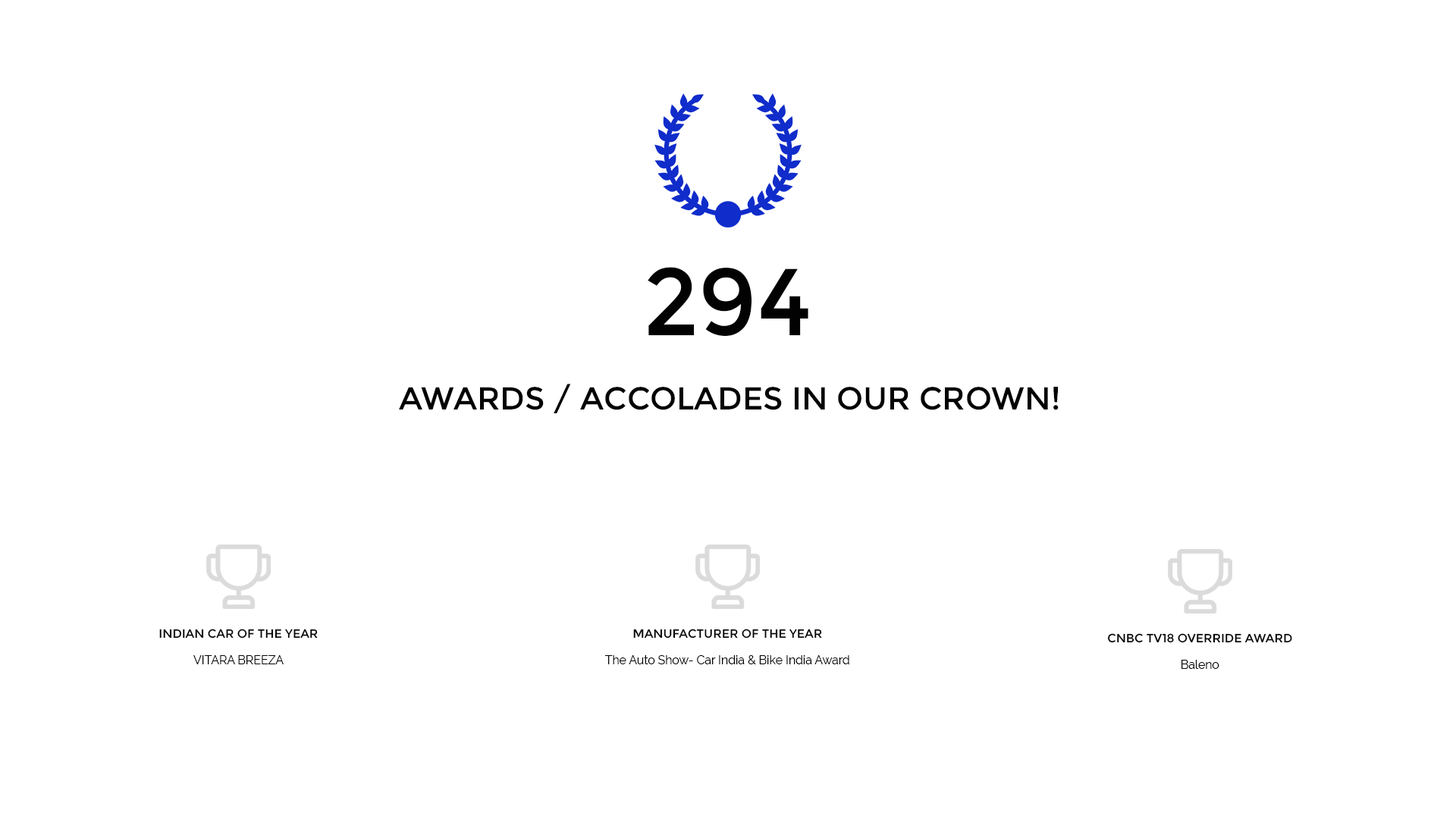
<style>
.page{position:relative;width:1456px;height:819px;background:#ffffff}
.page>*{position:absolute;margin:0}
.t1{font:94.8px "Montserrat-Regular";color:#020202;font-variant:small-caps}
.t2{font:31.6px "Montserrat-Regular";color:#020202;font-variant:small-caps}
.t3{font:11.9px/26.6px "Montserrat-Regular";color:#020202;font-variant:small-caps}
.t4{font:11.9px/26.6px "Raleway-Regular";color:#020202;font-variant:small-caps}
.t5{font:11.9px/26.6px "Raleway-Regular";color:#020202}
</style>
<div class="page">
<p class="t1" style="left:648px;top:267px;width:160px;height:69px">294</p>
<p class="t2" style="left:399px;top:384px;width:660px;height:29px">AWARDS / ACCOLADES IN OUR CROWN!</p>
<p class="t3" style="left:159px;top:629px;width:159px;height:35px;text-align:center">INDIAN CAR OF THE YEAR<br><span class="t4">VITARA BREEZA</span></p>
<p class="t5" style="left:604px;top:629px;width:245px;height:35px;text-align:center"><span class="t3">MANUFACTURER OF THE YEAR<br></span>The Auto Show- Car India &amp; Bike India Award</p>
<p class="t3" style="left:1107px;top:633px;width:185px;height:36px;text-align:center">CNBC TV18 OVERRIDE AWARD<br><span class="t5">Baleno</span></p>
</div>
